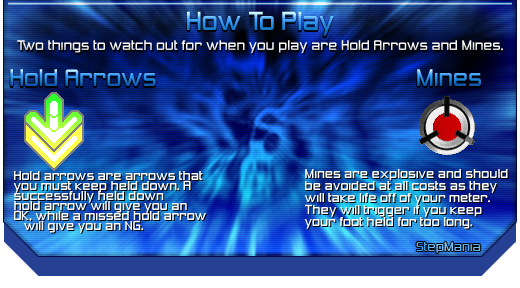
<style>
.page{position:relative;width:520px;height:288px}
.page>*{position:absolute;margin:0}
.t1{font:24px "ZeroThrees"}
.t2{font:13px "ZeroThrees";color:#ffffff}
.t3{font:22px "ZeroThrees"}
.t4{font:12px/10px "ZeroThrees";color:#ffffff}
.t5{font:12px "ZeroThrees";color:#ffffff}
.t6{font:12px "ZeroThrees"}
</style>
<div class="page">
<p class="t1" style="left:187px;top:11px;width:147px;height:25px">How To Play</p>
<p class="t2" style="left:17px;top:40px;width:486px;height:13px">Two things to watch out for when you play are Hold Arrows and Mines.</p>
<p class="t3" style="left:10px;top:69px;width:146px;height:17px">Hold Arrows</p>
<p class="t3" style="left:417px;top:69px;width:64px;height:17px">Mines</p>
<p class="t4" style="left:13px;top:171px;width:193px;height:62px">Hold arrows are arrows that<br>you must keep held down. A<br>successfully held down<br>hold arrow will give you an<br>OK, while a missed hold arrow<br>   will give you an NG.</p>
<p class="t5" style="left:304px;top:169px;width:204px;height:60px">Mines are explosive and should<br>be avoided at all costs as they<br>will take life off of your meter.<br>They will trigger if you keep<br>your foot held for too long.</p>
<p class="t6" style="left:416px;top:242px;width:65px;height:11px">StepMania</p>
</div>
